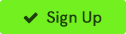
<style>
.page{position:relative;width:126px;height:34px;background:#72f020}
.page>*{position:absolute;margin:0}
.t1{font:16px "HKGrotesk-Medium";color:#1e3e0a;font-weight:bold}
</style>
<div class="page">
<p class="t1" style="left:46px;top:11px;width:56px;height:16px">Sign Up</p>
</div>
